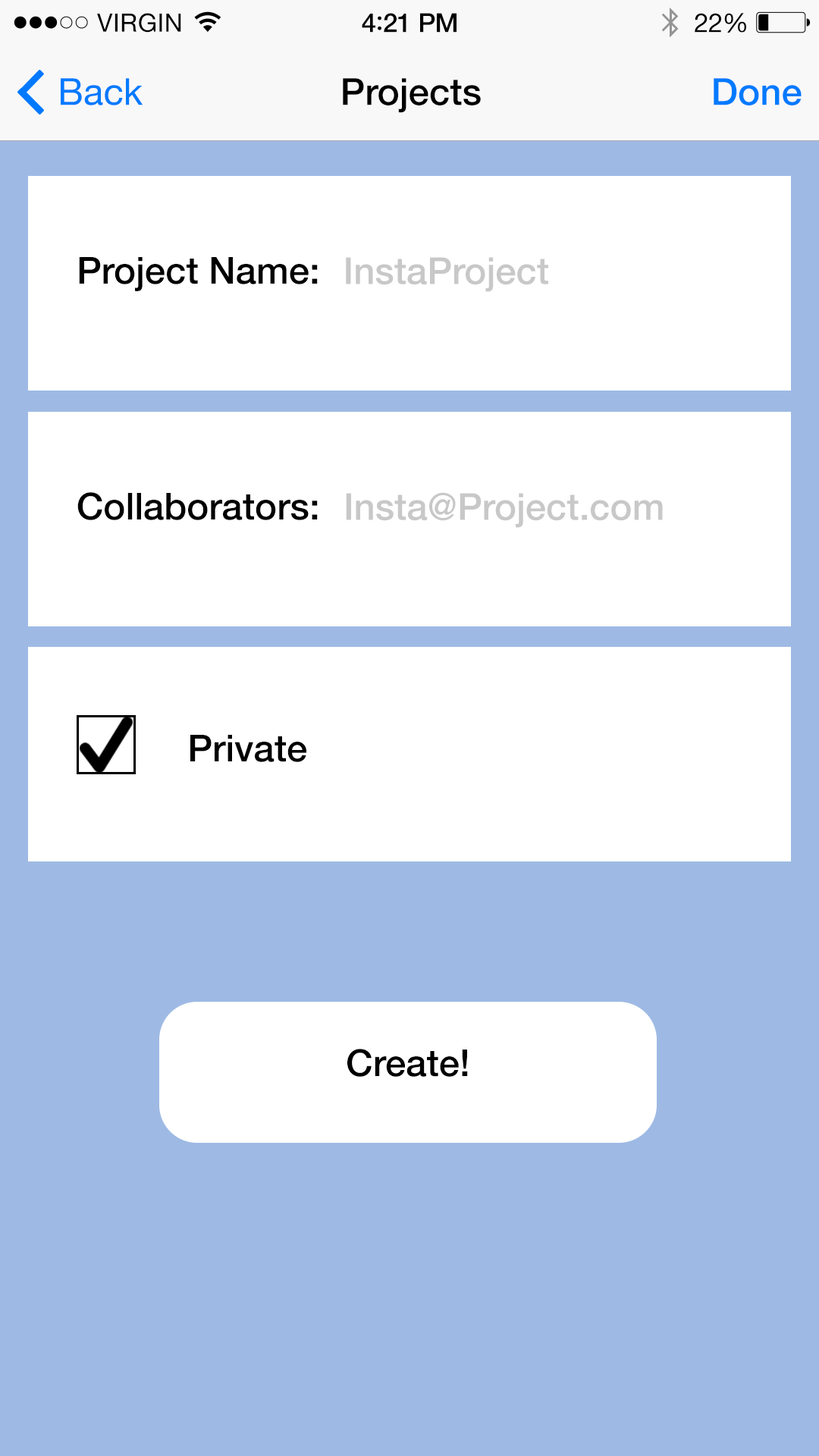
<style>
.page{position:relative;width:819px;height:1456px;background:#ffffff}
.page>*{position:absolute;margin:0}
.t1{font:25.1px "HelveticaNeue";letter-spacing:0.02em;color:#000000}
.t2{font:26.2px "HelveticaNeue-Medium";letter-spacing:-0.02em;color:#000000}
.t3{font:28.4px "Avenir-Medium";letter-spacing:-0.02em;color:#000000}
.t4{font:26.2px "HelveticaNeue";letter-spacing:-0.02em;color:#000000}
.t5{font:37.2px "HelveticaNeue";color:#007aff}
.t6{font:37.2px "HelveticaNeue-Medium";color:#000000}
.t7{font:37.2px "HelveticaNeue-Medium";color:#007aff}
.t8{font:37.2px "HelveticaNeue-Medium";color:#c8c8c8}
</style>
<div class="page">
<p class="t1" style="left:97px;top:13px;width:84px;height:20px">VIRGIN</p>
<p class="t2" style="left:362px;top:13px;width:95px;height:20px">4<span class="t3">:</span>21 PM</p>
<p class="t4" style="left:695px;top:13px;width:51px;height:20px">22%</p>
<p class="t5" style="left:61px;top:78px;width:82px;height:27px">Back</p>
<p class="t6" style="left:343px;top:78px;width:138px;height:35px">Projects</p>
<p class="t7" style="left:714px;top:78px;width:88px;height:27px">Done</p>
<p class="t6" style="left:79px;top:257px;width:239px;height:34px">Project Name:</p>
<p class="t8" style="left:346px;top:257px;width:202px;height:35px">InstaProject</p>
<p class="t6" style="left:77px;top:492px;width:241px;height:28px">Collaborators:</p>
<p class="t8" style="left:346px;top:492px;width:317px;height:36px">Insta@Project.com</p>
<p class="t6" style="left:190px;top:735px;width:116px;height:27px">Private</p>
<p class="t6" style="left:347px;top:1049px;width:121px;height:28px">Create!</p>
</div>
